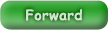
<style>
.page{position:relative;width:108px;height:30px}
.page>*{position:absolute;margin:0}
.t1{font:14px "ComicSansMS-Bold";letter-spacing:0.025em;color:#c9e7c9}
</style>
<div class="page">
<p class="t1" style="left:26px;top:9px;width:56px;height:12px">Forward</p>
</div>
